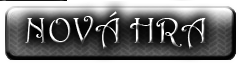
<style>
.page{position:relative;width:242px;height:67px}
.page>*{position:absolute;margin:0}
.t1{font:36px "Harrington"}
</style>
<div class="page">
<p class="t1" style="left:25px;top:11px;width:181px;height:38px">NOVÁ HRA</p>
</div>
